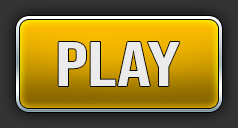
<style>
.page{position:relative;width:238px;height:128px}
.page>*{position:absolute;margin:0}
.t1{font:62.5px "BebasNeue-Regular";color:#ebebeb;scale:1.35 1}
</style>
<div class="page">
<p class="t1" style="left:58px;top:42px;width:122px;height:44px">PLAY</p>
</div>
